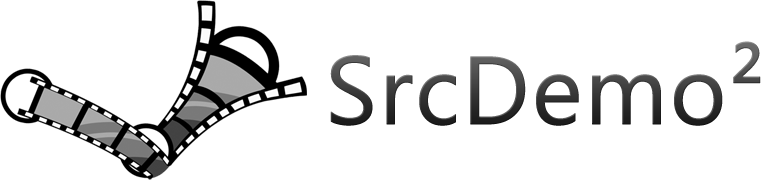
<style>
.page{position:relative;width:768px;height:180px;background:#ffffff}
.page>*{position:absolute;margin:0}
.t1{font:96px "SegoeUI";font-weight:bold}
</style>
<div class="page">
<p class="t1" style="left:330px;top:41px;width:431px;height:85px">SrcDemo²</p>
</div>
